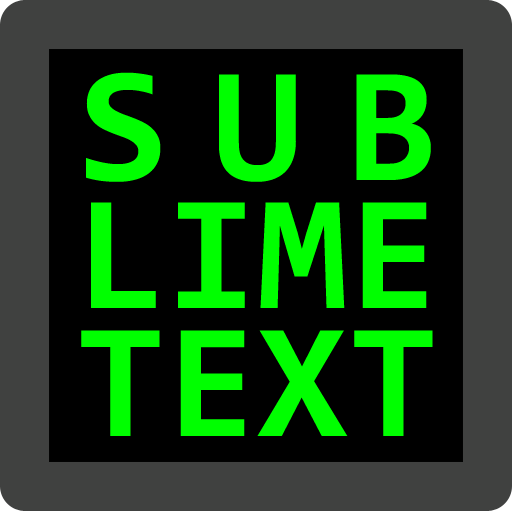
<style>
.page{position:relative;width:512px;height:512px;background:#000000}
.page>*{position:absolute;margin:0}
.t1{font:165.3px/127.7px "Consolas-Bold";color:#00ff00}
.t2{font:165.3px/127.7px "Consolas-Bold";letter-spacing:0.26em;color:#00ff00}
</style>
<div class="page">
<p class="t1" style="left:81px;top:72px;width:352px;height:364px;text-align:center"><span class="t2">SUB<br></span>LIME<br>TEXT</p>
</div>
